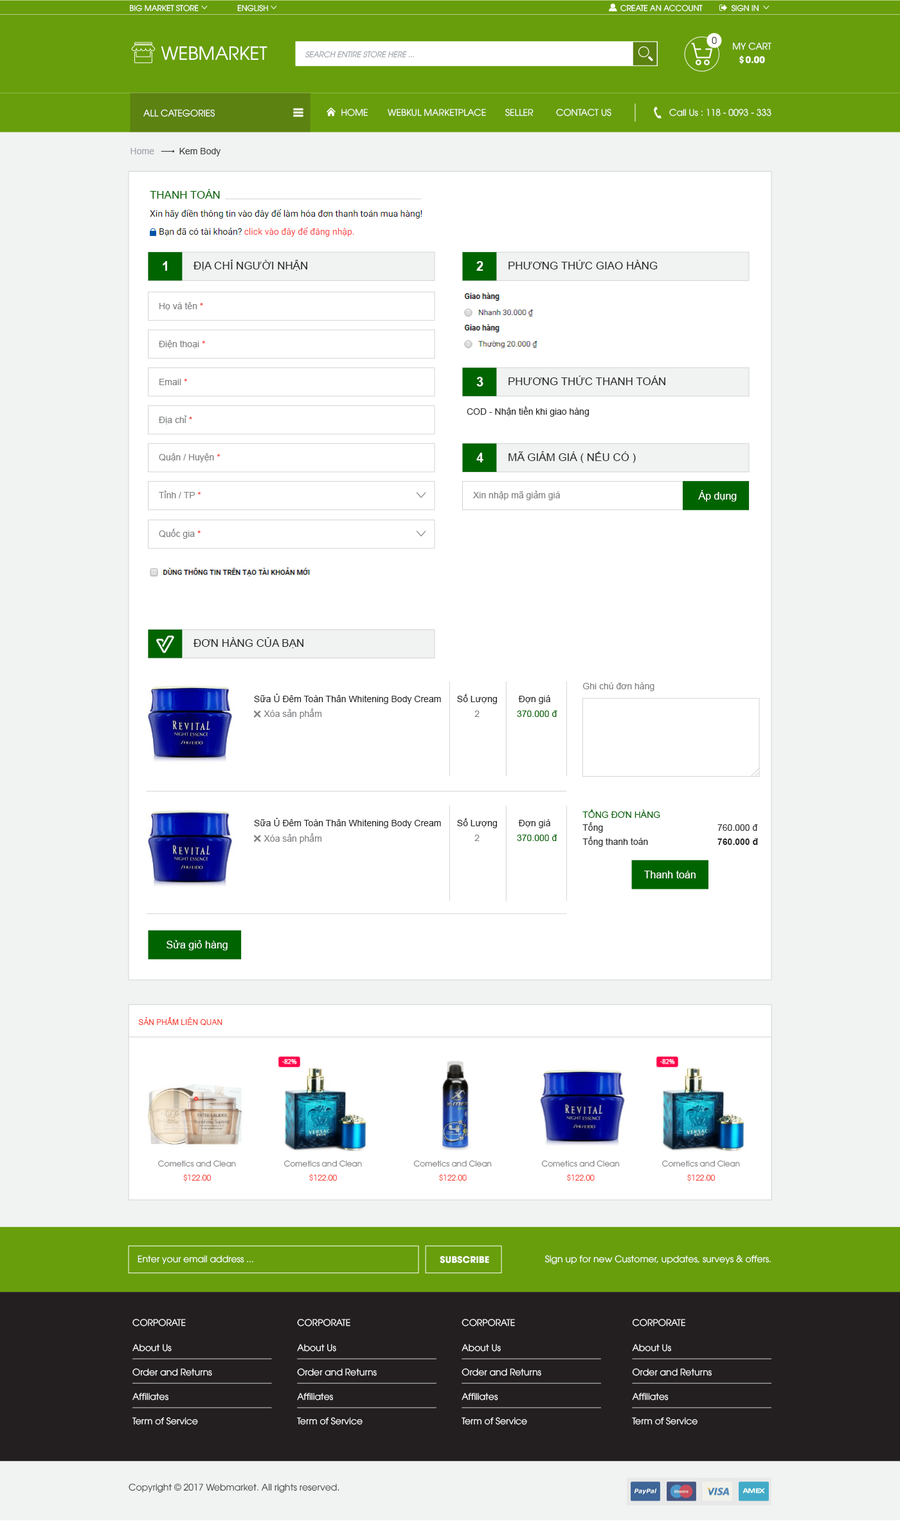
<style>
.page{position:relative;width:900px;height:1522px;background:#ffffff}
.page>*{position:absolute;margin:0}
.t1{font:7.7px "UTM-Avo";color:#ffffff}
.t2{font:9px "UTM-Avo"}
.t3{font:18px "UTM-Avo";color:#ffffff}
.t4{font:7.7px "UTMAvo-Italic";color:#9da3aa}
.t5{font:9px "UTM-Avo";color:#ffffff}
.t6{font:9px "UTMAvoBold";color:#ffffff}
.t7{font:9px "ArialMT";color:#9da3aa}
.t8{font:9px "ArialMT";color:#414042}
.t9{font:10.9px "ArialMT";color:#006400}
.t10{font:12.9px "Arial-BoldMT";color:#ffffff}
.t11{font:10.9px "ArialMT";color:#282828}
.t12{font:9px "ArialMT";color:#808285}
.t13{font:9px "ArialMT";color:#f54337}
.t14{font:9px "ArialMT";color:#282828}
.t15{font:10.3px "ArialMT";color:#ffffff}
.t16{font:9px "ArialMT";color:#006400}
.t17{font:9px "Arial-BoldMT";color:#282828}
.t18{font:7.7px "ArialMT";color:#f54337}
.t19{font:7.7px "UTM-Avo";color:#808285}
.t20{font:7.7px "UTM-Avo";color:#f54337}
.t21{font:9px "UTM-Avo";color:#414042}
</style>
<div class="page">
<p class="t1" style="left:130px;top:4px;width:69px;height:8px">BIG MARKET STORE</p>
<p class="t1" style="left:237px;top:4px;width:31px;height:8px">ENGLISH</p>
<p class="t1" style="left:620px;top:4px;width:83px;height:8px">CREATE AN ACCOUNT</p>
<p class="t1" style="left:731px;top:4px;width:28px;height:8px">SIGN IN</p>
<p class="t2" style="left:712px;top:37px;width:5px;height:7px">0</p>
<p class="t3" style="left:161px;top:46px;width:106px;height:14px">WEBMARKET</p>
<p class="t4" style="left:305px;top:51px;width:109px;height:7px">SEARCH ENTIRE STORE HERE ...</p>
<p class="t5" style="left:733px;top:42px;width:38px;height:8px">MY CART</p>
<p class="t6" style="left:739px;top:55px;width:26px;height:9px">$ 0.00</p>
<p class="t5" style="left:143px;top:109px;width:72px;height:8px">ALL CATEGORIES</p>
<p class="t5" style="left:341px;top:109px;width:27px;height:7px">HOME</p>
<p class="t5" style="left:388px;top:109px;width:98px;height:7px">WEBKUL MARKETPLACE</p>
<p class="t5" style="left:505px;top:109px;width:29px;height:7px">SELLER</p>
<p class="t5" style="left:556px;top:109px;width:55px;height:7px">CONTACT US</p>
<p class="t5" style="left:669px;top:109px;width:102px;height:7px">Call Us : 118 - 0093 - 333</p>
<p class="t7" style="left:130px;top:148px;width:24px;height:6px">Home</p>
<p class="t8" style="left:179px;top:148px;width:42px;height:8px">Kem Body</p>
<p class="t9" style="left:150px;top:189px;width:70px;height:10px">THANH TOÁN</p>
<p class="t10" style="left:163px;top:261px;width:4px;height:10px">1</p>
<p class="t11" style="left:193px;top:260px;width:114px;height:11px">ĐỊA CHỈ NGƯỜI NHẬN</p>
<p class="t10" style="left:476px;top:261px;width:7px;height:10px">2</p>
<p class="t11" style="left:509px;top:260px;width:149px;height:9px">PHƯƠNG THỨC GIAO HÀNG</p>
<p class="t12" style="left:159px;top:302px;width:44px;height:8px">Họ và tên <span class="t13">*</span></p>
<p class="t12" style="left:158px;top:340px;width:47px;height:8px">Điện thoại <span class="t13">*</span></p>
<p class="t10" style="left:476px;top:377px;width:7px;height:9px">3</p>
<p class="t11" style="left:509px;top:375px;width:156px;height:10px">PHƯƠNG THỨC THANH TOÁN</p>
<p class="t12" style="left:159px;top:379px;width:28px;height:6px">Email <span class="t13">*</span></p>
<p class="t14" style="left:467px;top:406px;width:122px;height:11px">COD - Nhận tiền khi giao hàng</p>
<p class="t12" style="left:158px;top:415px;width:34px;height:9px">Địa chỉ <span class="t13">*</span></p>
<p class="t12" style="left:159px;top:453px;width:62px;height:9px">Quận / Huyện <span class="t13">*</span></p>
<p class="t10" style="left:476px;top:453px;width:7px;height:9px">4</p>
<p class="t11" style="left:509px;top:451px;width:127px;height:12px">MÃ GIẢM GIÁ ( NẾU CÓ )</p>
<p class="t12" style="left:159px;top:491px;width:42px;height:7px">Tỉnh / TP <span class="t13">*</span></p>
<p class="t12" style="left:473px;top:491px;width:87px;height:9px">Xin nhập mã giảm giá</p>
<p class="t15" style="left:698px;top:490px;width:39px;height:11px">Áp dụng</p>
<p class="t12" style="left:159px;top:528px;width:42px;height:11px">Quốc gia <span class="t13">*</span></p>
<p class="t11" style="left:193px;top:637px;width:110px;height:11px">ĐƠN HÀNG CỦA BẠN</p>
<p class="t12" style="left:582px;top:682px;width:72px;height:9px">Ghi chú đơn hàng</p>
<p class="t14" style="left:254px;top:694px;width:187px;height:10px">Sữa Ủ Đêm Toàn Thân Whitening Body Cream</p>
<p class="t14" style="left:457px;top:694px;width:40px;height:10px">Số Lượng</p>
<p class="t14" style="left:518px;top:695px;width:32px;height:9px">Đợn giá</p>
<p class="t12" style="left:264px;top:708px;width:58px;height:11px">Xóa sản phẩm</p>
<p class="t12" style="left:474px;top:710px;width:6px;height:7px">2</p>
<p class="t16" style="left:517px;top:710px;width:40px;height:7px">370.000 đ</p>
<p class="t16" style="left:582px;top:809px;width:78px;height:9px">TỔNG ĐƠN HÀNG</p>
<p class="t14" style="left:254px;top:818px;width:187px;height:10px">Sữa Ủ Đêm Toàn Thân Whitening Body Cream</p>
<p class="t14" style="left:457px;top:818px;width:40px;height:10px">Số Lượng</p>
<p class="t14" style="left:518px;top:819px;width:32px;height:9px">Đợn giá</p>
<p class="t12" style="left:264px;top:833px;width:58px;height:10px">Xóa sản phẩm</p>
<p class="t14" style="left:582px;top:822px;width:21px;height:11px">Tổng</p>
<p class="t14" style="left:717px;top:824px;width:41px;height:7px">760.000 đ</p>
<p class="t12" style="left:474px;top:834px;width:6px;height:7px">2</p>
<p class="t16" style="left:517px;top:834px;width:40px;height:7px">370.000 đ</p>
<p class="t14" style="left:582px;top:836px;width:66px;height:11px">Tổng thanh toán</p>
<p class="t17" style="left:717px;top:838px;width:42px;height:7px">760.000 đ</p>
<p class="t15" style="left:644px;top:870px;width:52px;height:8px">Thanh toán</p>
<p class="t15" style="left:166px;top:940px;width:62px;height:10px">Sửa giỏ hàng</p>
<p class="t18" style="left:138px;top:1017px;width:84px;height:8px">SẢN PHẨM LIÊN QUAN</p>
<p class="t19" style="left:158px;top:1160px;width:78px;height:7px">Cometics and Clean</p>
<p class="t19" style="left:284px;top:1160px;width:78px;height:7px">Cometics and Clean</p>
<p class="t19" style="left:413px;top:1160px;width:79px;height:7px">Cometics and Clean</p>
<p class="t19" style="left:541px;top:1160px;width:79px;height:7px">Cometics and Clean</p>
<p class="t19" style="left:662px;top:1160px;width:78px;height:7px">Cometics and Clean</p>
<p class="t20" style="left:183px;top:1174px;width:28px;height:7px">$122.00</p>
<p class="t20" style="left:309px;top:1174px;width:28px;height:7px">$122.00</p>
<p class="t20" style="left:439px;top:1174px;width:28px;height:7px">$122.00</p>
<p class="t20" style="left:567px;top:1174px;width:28px;height:7px">$122.00</p>
<p class="t20" style="left:687px;top:1174px;width:28px;height:7px">$122.00</p>
<p class="t5" style="left:138px;top:1255px;width:115px;height:9px">Enter your email address ...</p>
<p class="t6" style="left:440px;top:1256px;width:49px;height:7px">SUBSCRIBE</p>
<p class="t5" style="left:544px;top:1255px;width:227px;height:9px">Sign up for new Customer, updates, surveys &amp; offers.</p>
<p class="t5" style="left:132px;top:1318px;width:54px;height:8px">CORPORATE</p>
<p class="t5" style="left:297px;top:1318px;width:53px;height:8px">CORPORATE</p>
<p class="t5" style="left:462px;top:1318px;width:53px;height:8px">CORPORATE</p>
<p class="t5" style="left:632px;top:1318px;width:53px;height:8px">CORPORATE</p>
<p class="t5" style="left:132px;top:1344px;width:40px;height:7px">About Us</p>
<p class="t5" style="left:297px;top:1344px;width:39px;height:7px">About Us</p>
<p class="t5" style="left:462px;top:1344px;width:39px;height:7px">About Us</p>
<p class="t5" style="left:632px;top:1344px;width:39px;height:7px">About Us</p>
<p class="t5" style="left:132px;top:1368px;width:80px;height:8px">Order and Returns</p>
<p class="t5" style="left:297px;top:1368px;width:80px;height:8px">Order and Returns</p>
<p class="t5" style="left:462px;top:1368px;width:79px;height:8px">Order and Returns</p>
<p class="t5" style="left:632px;top:1368px;width:80px;height:8px">Order and Returns</p>
<p class="t5" style="left:132px;top:1392px;width:36px;height:8px">Affiliates</p>
<p class="t5" style="left:297px;top:1392px;width:36px;height:8px">Affiliates</p>
<p class="t5" style="left:462px;top:1392px;width:36px;height:8px">Affiliates</p>
<p class="t5" style="left:632px;top:1392px;width:37px;height:8px">Affiliates</p>
<p class="t5" style="left:132px;top:1417px;width:66px;height:8px">Term of Service</p>
<p class="t5" style="left:297px;top:1417px;width:66px;height:8px">Term of Service</p>
<p class="t5" style="left:462px;top:1417px;width:65px;height:8px">Term of Service</p>
<p class="t5" style="left:632px;top:1417px;width:66px;height:8px">Term of Service</p>
<p class="t21" style="left:129px;top:1483px;width:210px;height:10px">Copyright © 2017 Webmarket. All rights reserved.</p>
</div>
